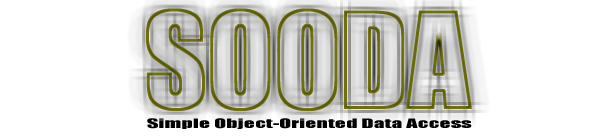
<style>
.page{position:relative;width:600px;height:140px;background:#ffffff}
.page>*{position:absolute;margin:0}
.t1{font:12.1px "Impact";color:#000000;scale:1.83 1}
</style>
<div class="page">
<p class="t1" style="left:147px;top:118px;width:325px;height:11px">Simple Object-Oriented Data Access</p>
</div>
